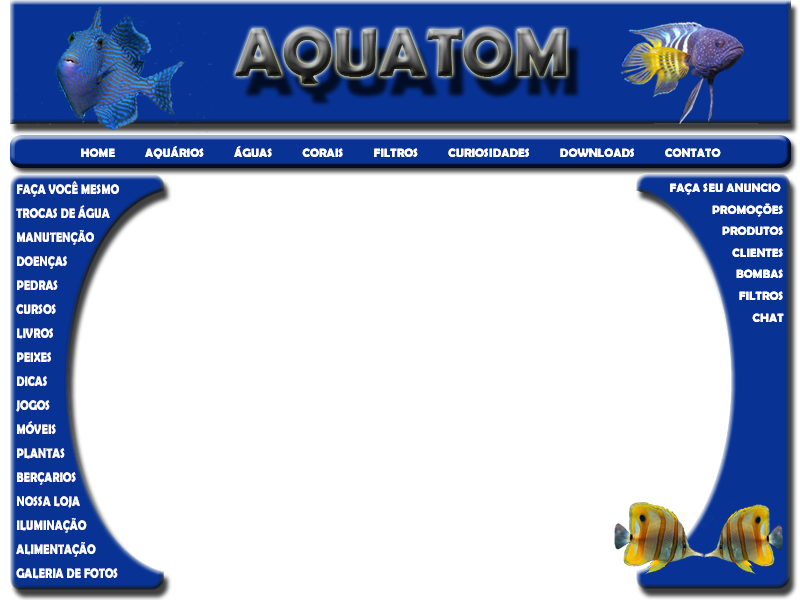
<style>
.page{position:relative;width:800px;height:600px;background:#ffffff}
.page>*{position:absolute;margin:0}
.t1{font:68px "BerlinSansFBDemi-Bold"}
.t2{font:12px "BerlinSansFBDemi-Bold";color:#ffffff}
.t3{font:14px "BerlinSansFBDemi-Bold";color:#ffffff;scale:0.81 1}
</style>
<div class="page">
<p class="t1" style="left:235px;top:28px;width:332px;height:56px">AQUATOM</p>
<p class="t2" style="left:81px;top:146px;width:640px;height:13px">HOME          AQUÁRIOS          ÁGUAS          CORAIS          FILTROS          CURIOSIDADES          DOWNLOADS          CONTATO</p>
<p class="t3" style="left:16px;top:181px;width:103px;height:398px">FAÇA VOCÊ MESMO<br><br>TROCAS DE ÁGUA<br><br>MANUTENÇÃO<br><br>DOENÇAS<br><br>PEDRAS<br><br>CURSOS<br><br>LIVROS<br><br>PEIXES<br><br>DICAS<br><br>JOGOS<br><br>MÓVEIS<br><br>PLANTAS<br><br>BERÇARIOS<br><br>NOSSA LOJA<br><br>ILUMINAÇÃO<br><br>ALIMENTAÇÃO<br><br>GALERIA DE FOTOS</p>
<p class="t2" style="left:670px;top:183px;width:114px;height:139px;text-align:right">FAÇA SEU ANUNCIO <br><br>PROMOÇÕES<br><br>PRODUTOS<br><br>CLIENTES<br><br>BOMBAS<br><br>FILTROS<br><br>CHAT</p>
</div>
